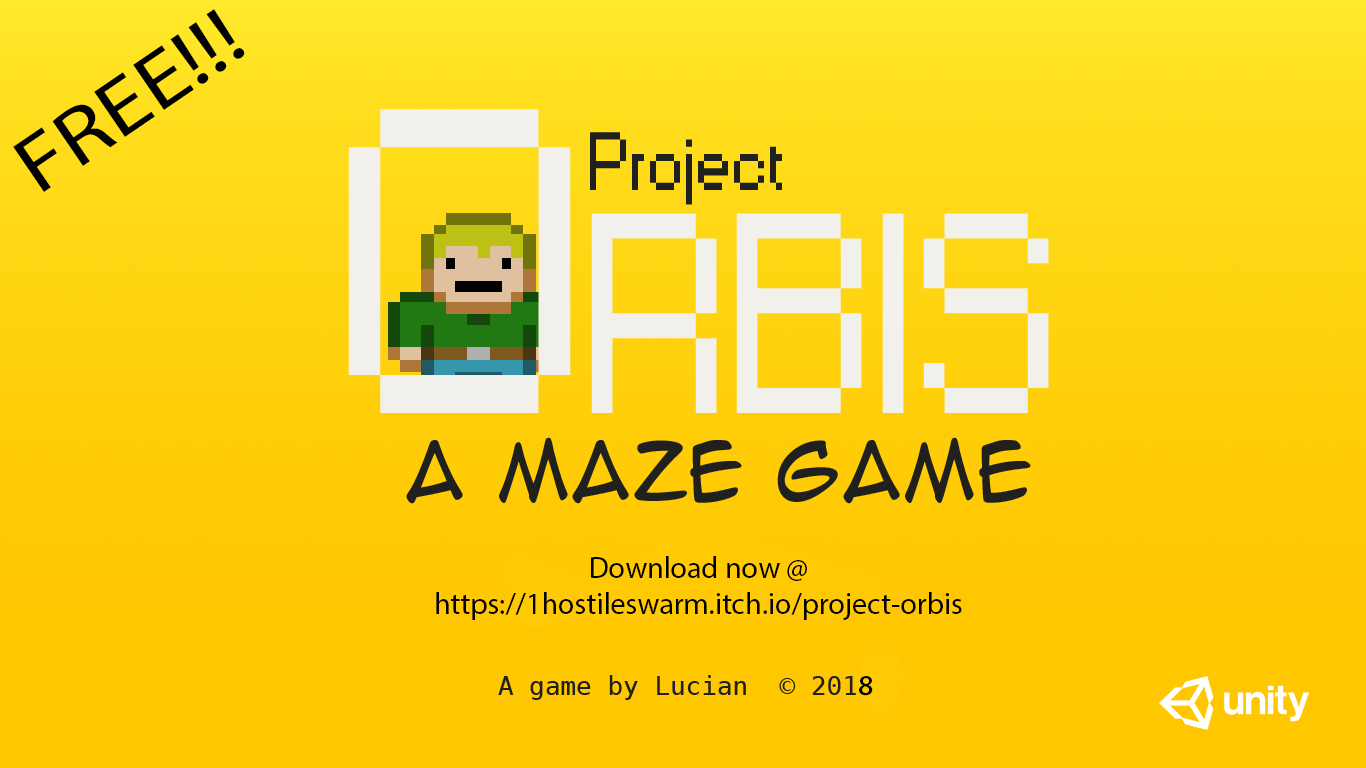
<style>
.page{position:relative;width:1366px;height:768px;background:#ffc700}
.page>*{position:absolute;margin:0}
.t1{font:81px "MyriadPro-Regular";color:#000000;scale:1.18 1}
.t2{font:266px "Small Fonts";color:#f1f0ea}
.t3{font:405px "Small Fonts";color:#f1f0ea}
.t4{font:77px "Small Fonts";color:#20201f}
.t5{font:75px "AnimeAce";color:#20201f}
.t6{font:30px "MyriadPro-Regular";color:#000000}
.t7{font:48px "MyriadPro-Regular";color:#000000}
</style>
<div class="page">
<p class="t1" style="left:13px;top:9px;width:232px;height:183px;rotate:-34deg">FREE!!!</p>
<p class="t2" style="left:348px;top:109px;width:701px;height:304px"><span class="t3">O</span>RBIS</p>
<p class="t4" style="left:590px;top:132px;width:192px;height:73px">Project</p>
<p class="t5" style="left:406px;top:437px;width:625px;height:67px">A MAZE GAME</p>
<p class="t6" style="left:436px;top:556px;width:526px;height:64px;text-align:center">Download now @<br>https://1hostileswarm.itch.io/project-orbis</p>
<p class="t7" style="left:859px;top:676px;width:14px;height:20px">8</p>
</div>
